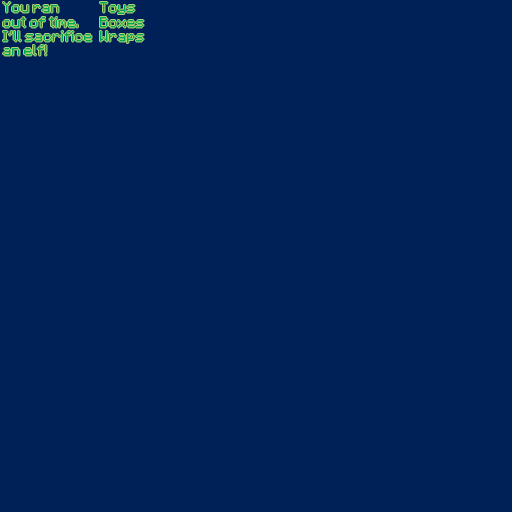
<style>
.page{position:relative;width:512px;height:512px;background:#002157}
.page>*{position:absolute;margin:0}
.t1{font:12px "Minecraftia-Regular";color:#00a651}
</style>
<div class="page">
<p class="t1" style="left:3px;top:2px;width:89px;height:54px">You ran <br>out of time.<br>I’ll sacrifice <br>an elf!</p>
<p class="t1" style="left:100px;top:2px;width:44px;height:41px">Toys<br>Boxes<br>Wraps</p>
</div>
